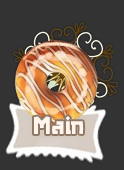
<style>
.page{position:relative;width:124px;height:170px;background:#333333}
.page>*{position:absolute;margin:0}
.t1{font:21px "AB-karuta_bold";color:#fff5ec}
</style>
<div class="page">
<p class="t1" style="left:34px;top:116px;width:50px;height:18px">Main</p>
</div>
